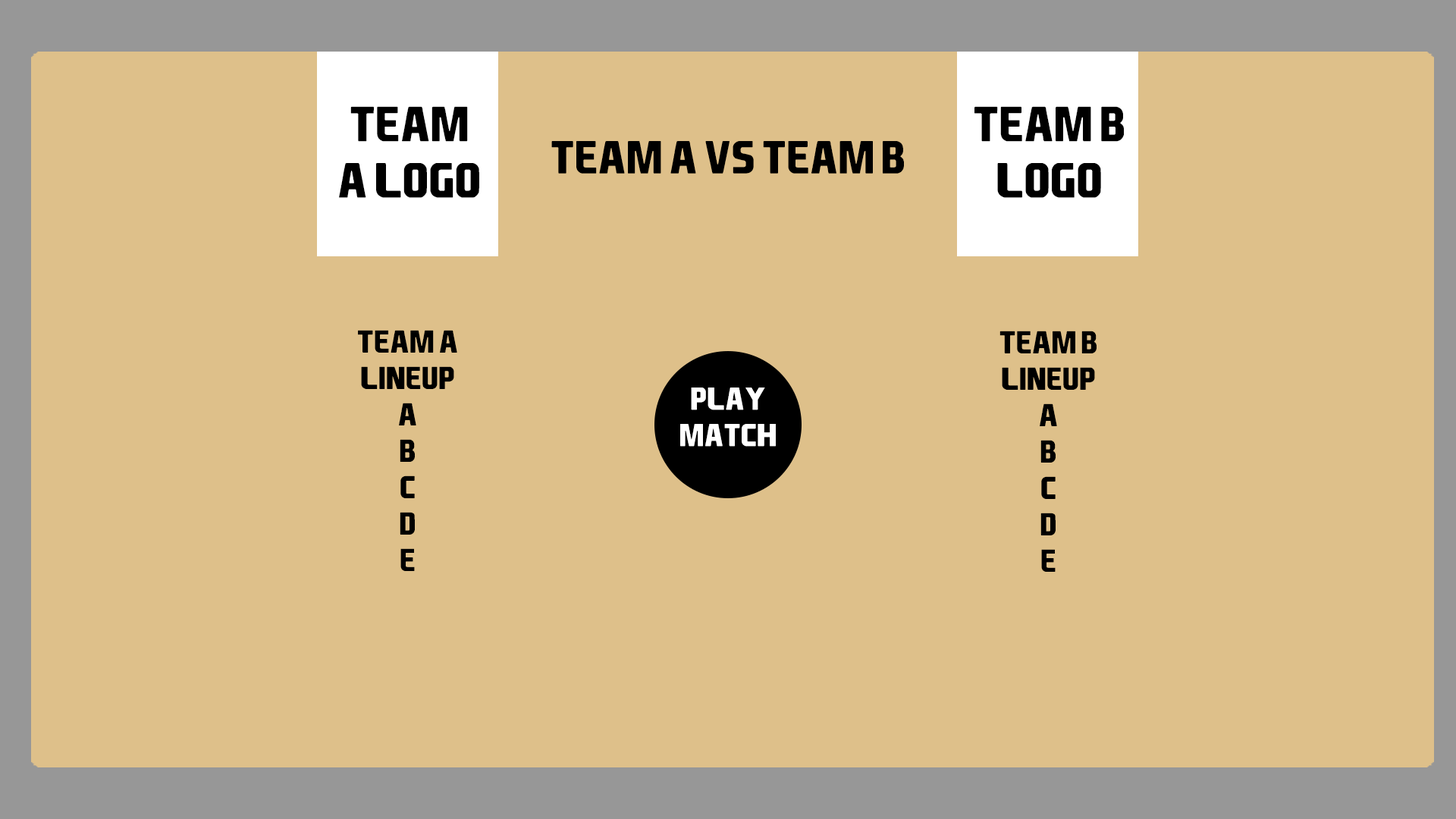
<style>
.page{position:relative;width:1456px;height:819px;background:#dec08a}
.page>*{position:absolute;margin:0}
.t1{font:47px "EASPORTS";color:#000000}
.t2{font:44.2px "EASPORTS";color:#000000}
.t3{font:30.3px "EASPORTS";color:#000000}
.t4{font:30.3px "EASPORTS";color:#ffffff}
</style>
<div class="page">
<p class="t1" style="left:339px;top:106px;width:140px;height:92px;text-align:center">team a Logo</p>
<p class="t1" style="left:974px;top:106px;width:150px;height:92px;text-align:center">team b Logo</p>
<p class="t2" style="left:551px;top:141px;width:353px;height:33px">Team a vs team b</p>
<p class="t3" style="left:358px;top:330px;width:99px;height:241px;text-align:center">Team a<br>lineup<br>a<br>b<br>c<br>d<br>e</p>
<p class="t3" style="left:999px;top:331px;width:98px;height:241px;text-align:center">Team B<br>lineup<br>a<br>b<br>c<br>d<br>e</p>
<p class="t4" style="left:680px;top:388px;width:96px;height:59px;text-align:center">Play match</p>
</div>
